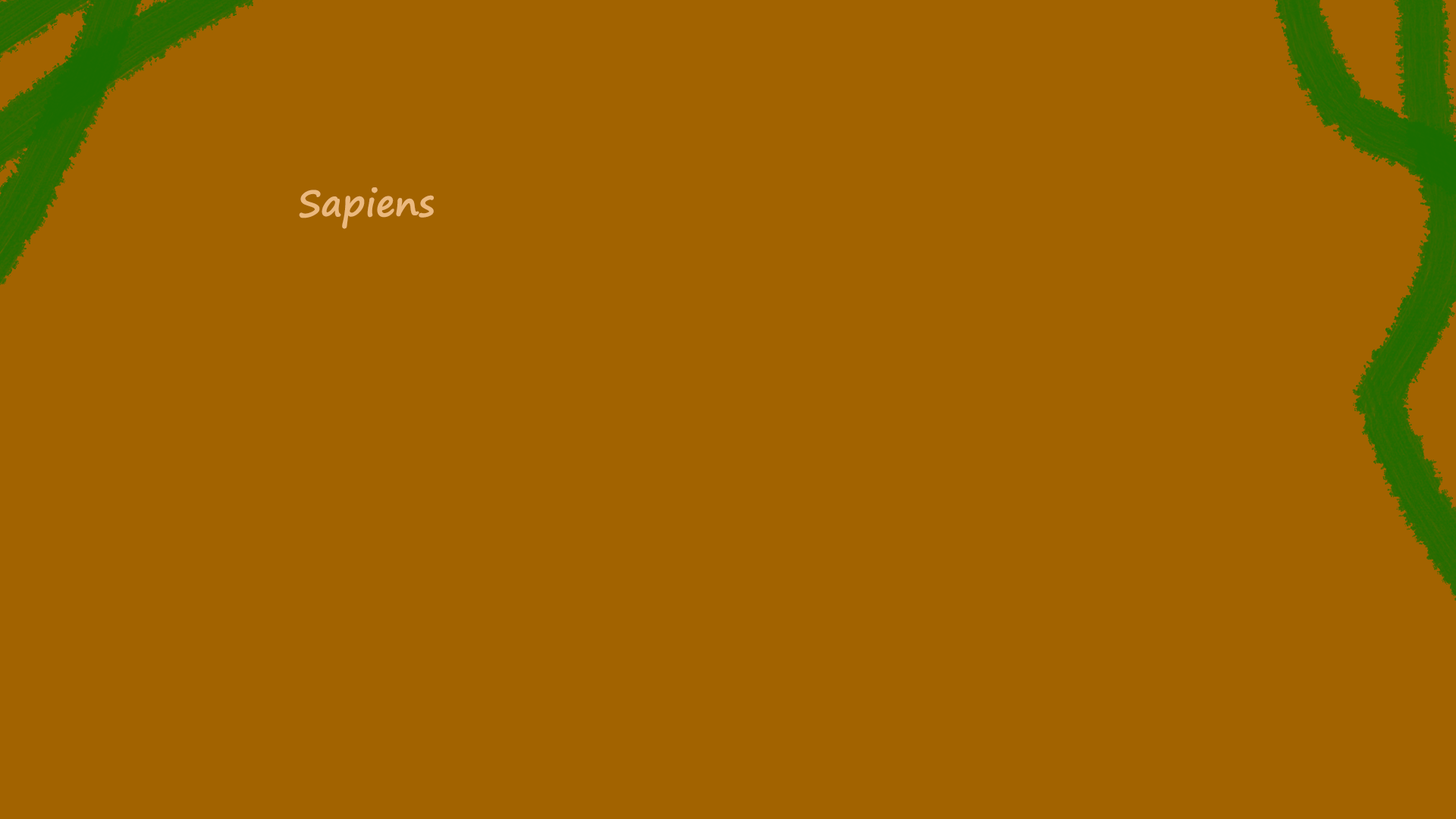
<style>
.page{position:relative;width:1456px;height:819px;background:#a26300}
.page>*{position:absolute;margin:0}
.t1{font:36.4px "SegoePrint-Bold";color:#ebb97e}
</style>
<div class="page">
<p class="t1" style="left:299px;top:187px;width:135px;height:42px">Sapiens</p>
</div>
